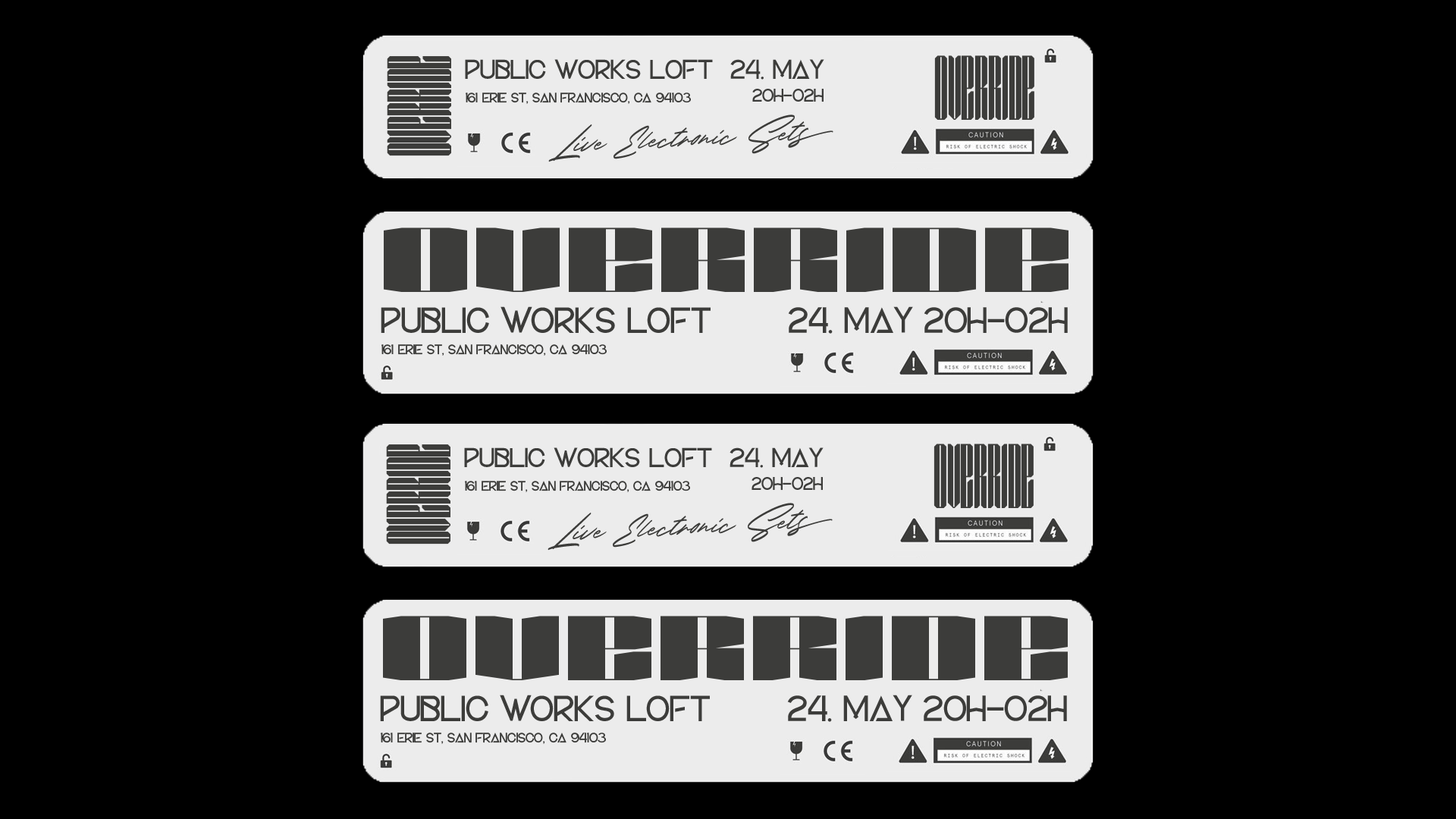
<style>
.page{position:relative;width:1456px;height:819px;background:#000000}
.page>*{position:absolute;margin:0}
.t1{font:91px "Zephyrus";color:#3c3c3a;text-transform:uppercase}
.t2{font:27.2px "BLANDBEARTRegular";color:#3c3c3a;text-transform:uppercase}
.t3{font:91.3px "Zephyrus";color:#3c3c3a;text-transform:uppercase}
.t4{font:18.2px "BLANDBEARTRegular";color:#3c3c3a;text-transform:uppercase}
.t5{font:13.7px "BLANDBEARTRegular";color:#3c3c3a;text-transform:uppercase}
.t6{font:50.4px "RedSky-Slanted";color:#3c3c3a;scale:0.82 1}
.t7{font:91.3px "Zephyrus";color:#3c3c3a;text-transform:uppercase;scale:6.82 1}
.t8{font:36.4px "BLANDBEARTRegular";color:#3c3c3a;text-transform:uppercase}
</style>
<div class="page">
<p class="t1" style="left:387px;top:56px;width:64px;height:100px;rotate:-90deg">OVERRIDE</p>
<p class="t2" style="left:465px;top:59px;width:359px;height:21px">PUBLIC WORKS LOFT  24. May</p>
<p class="t3" style="left:934px;top:55px;width:100px;height:65px">OVERRIDE</p>
<p class="t4" style="left:752px;top:89px;width:72px;height:13px">20H-02H</p>
<p class="t5" style="left:466px;top:93px;width:225px;height:11px">161 Erie St, San Francisco, CA 94103</p>
<p class="t6" style="left:548px;top:115px;width:285px;height:47px;rotate:-3deg">Live Electronic Sets</p>
<p class="t7" style="left:384px;top:227px;width:684px;height:65px">OVERRIDE</p>
<p class="t8" style="left:381px;top:306px;width:330px;height:27px">PUBLIC WORKS LOFT</p>
<p class="t8" style="left:788px;top:306px;width:280px;height:28px">24. May 20H-02H</p>
<p class="t5" style="left:381px;top:344px;width:226px;height:12px">161 Erie St, San Francisco, CA 94103</p>
</div>
